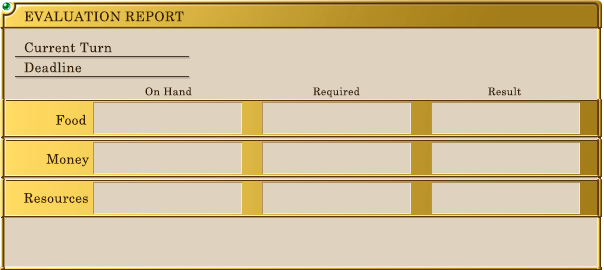
<style>
.page{position:relative;width:604px;height:270px;background:#dfd3c0}
.page>*{position:absolute;margin:0}
.t1{font:13.3px "CenturySchoolbook";letter-spacing:0.025em;color:#382005}
.t2{font:10.7px "CenturySchoolbook";letter-spacing:0.025em;color:#382005}
</style>
<div class="page">
<p class="t1" style="left:24px;top:11px;width:160px;height:11px">EVALUATION REPORT</p>
<p class="t1" style="left:24px;top:42px;width:88px;height:11px">Current Turn</p>
<p class="t1" style="left:24px;top:62px;width:58px;height:11px">Deadline</p>
<p class="t2" style="left:145px;top:87px;width:47px;height:9px">On Hand</p>
<p class="t2" style="left:313px;top:87px;width:47px;height:11px">Required</p>
<p class="t2" style="left:488px;top:87px;width:33px;height:9px">Result</p>
<p class="t1" style="left:56px;top:114px;width:31px;height:11px">Food</p>
<p class="t1" style="left:46px;top:154px;width:43px;height:13px">Money</p>
<p class="t1" style="left:24px;top:193px;width:64px;height:10px">Resources</p>
</div>
